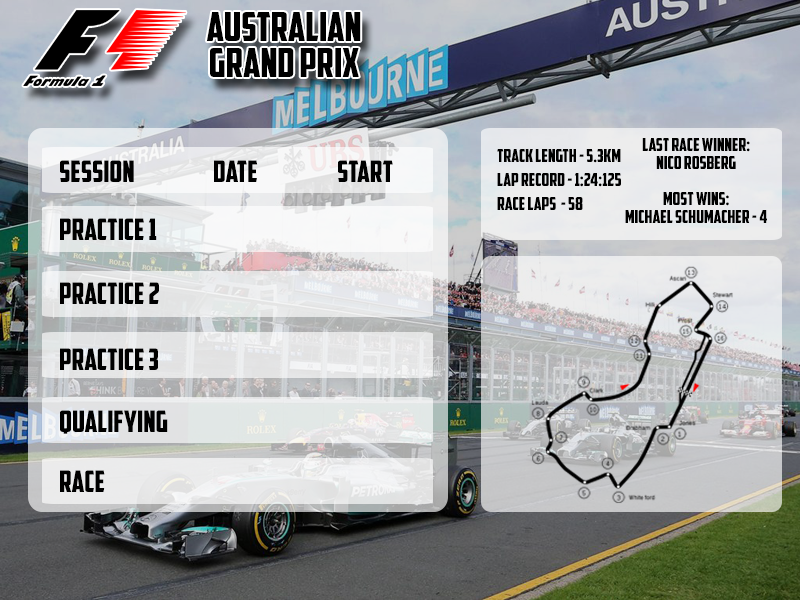
<style>
.page{position:relative;width:800px;height:600px}
.page>*{position:absolute;margin:0}
.t1{font:40px/36px "AmericanCaptain";color:#000000}
.t2{font:18px/24px "AmericanCaptain";color:#000000}
.t3{font:18px/18px "AmericanCaptain";color:#000000}
.t4{font:29.5px "AmericanCaptain";color:#000000}
</style>
<div class="page">
<p class="t1" style="left:207px;top:12px;width:154px;height:65px;text-align:center">AUSTRALIAN<br>GRAND PRIX</p>
<p class="t2" style="left:497px;top:149px;width:124px;height:61px">Track Length - 5.3KM<br>Lap record - 1:24:125<br>race Laps  - 58</p>
<p class="t3" style="left:625px;top:138px;width:142px;height:85px;text-align:center">lAST RACE WINNER:<br>NICO ROSBERG<br><br>mOST WINS:<br>michael schumacher - 4</p>
<p class="t4" style="left:60px;top:160px;width:74px;height:22px">SESSION</p>
<p class="t4" style="left:214px;top:160px;width:44px;height:22px">DATE</p>
<p class="t4" style="left:338px;top:160px;width:55px;height:22px">START</p>
<p class="t4" style="left:60px;top:218px;width:97px;height:22px">Practice 1</p>
<p class="t4" style="left:60px;top:282px;width:99px;height:22px">Practice 2</p>
<p class="t4" style="left:60px;top:348px;width:98px;height:22px">Practice 3</p>
<p class="t4" style="left:60px;top:410px;width:108px;height:24px">QUalifying</p>
<p class="t4" style="left:60px;top:470px;width:45px;height:22px">RACE</p>
</div>
